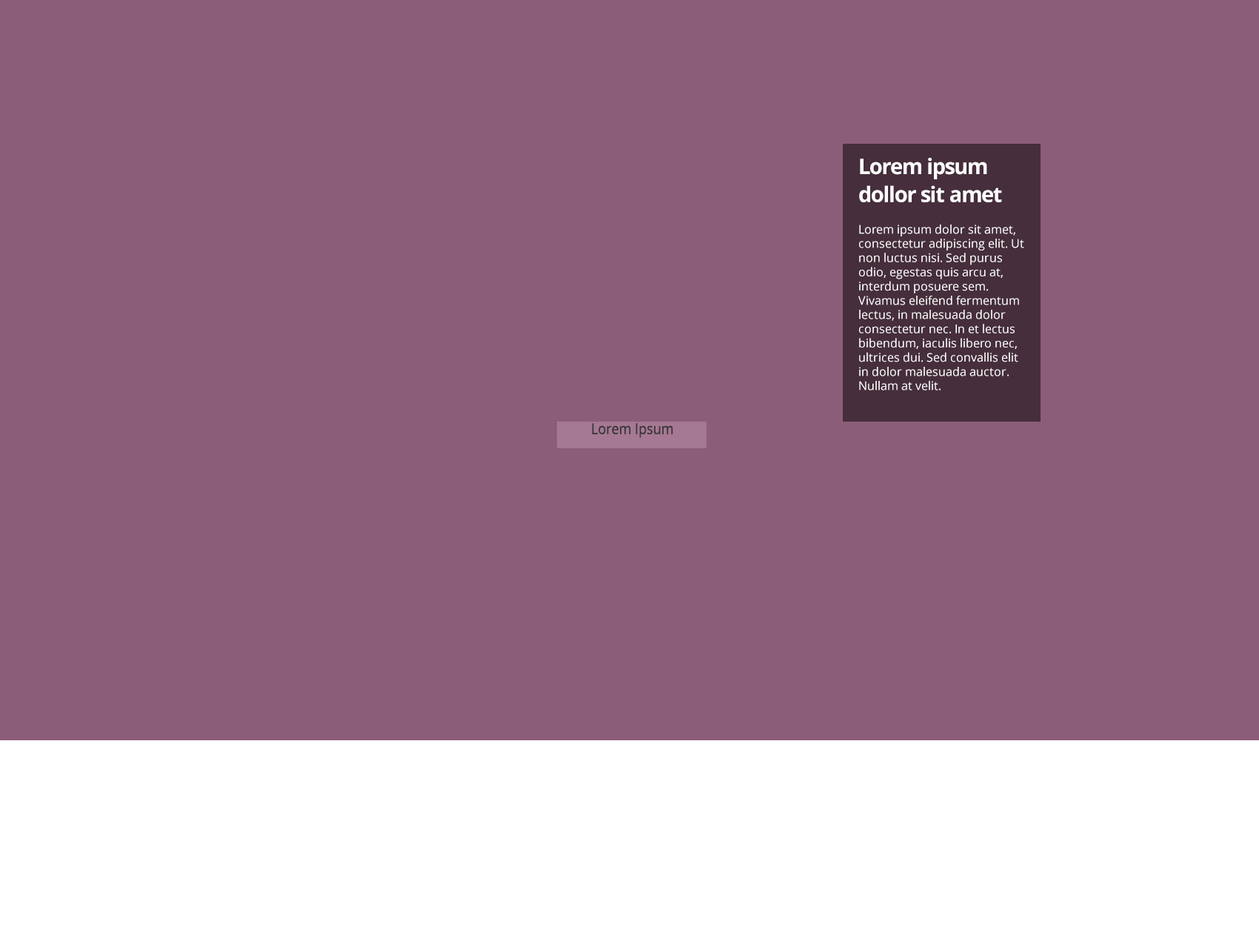
<style>
.page{position:relative;width:1259px;height:947px;background:#8c5d79}
.page>*{position:absolute;margin:0}
.t1{font:21.5px/28px "OpenSans-Bold";letter-spacing:-0.045em;color:#ffffff}
.t2{font:11.9px "OpenSans";color:#ffffff}
.t3{font:14.8px "OpenSans";color:#333333;scale:0.9 1}
</style>
<div class="page">
<p class="t1" style="left:859px;top:158px;width:143px;height:44px">Lorem ipsum dollor sit amet</p>
<p class="t2" style="left:859px;top:224px;width:166px;height:166px">Lorem ipsum dolor sit amet, consectetur adipiscing elit. Ut non luctus nisi. Sed purus odio, egestas quis arcu at, interdum posuere sem. Vivamus eleifend fermentum lectus, in malesuada dolor consectetur nec. In et lectus bibendum, iaculis libero nec, ultrices dui. Sed convallis elit in dolor malesuada auctor. Nullam at velit.</p>
<p class="t3" style="left:592px;top:423px;width:81px;height:15px">Lorem Ipsum</p>
</div>
